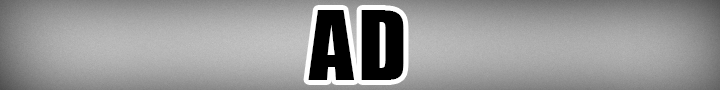
<style>
.page{position:relative;width:720px;height:90px}
.page>*{position:absolute;margin:0}
.t1{font:88px "Impact";letter-spacing:0.05em;color:#000000}
</style>
<div class="page">
<p class="t1" style="left:308px;top:10px;width:96px;height:70px">AD</p>
</div>
